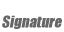
<style>
.page{position:relative;width:64px;height:32px;background:#ffffff}
.page>*{position:absolute;margin:0}
.t1{font:14.8px "Impact";color:#666666;font-style:italic}
</style>
<div class="page">
<p class="t1" style="left:2px;top:15px;width:60px;height:14px">Signature</p>
</div>
